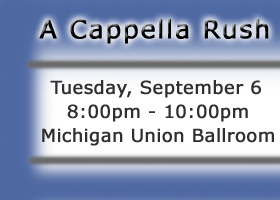
<style>
.page{position:relative;width:280px;height:200px}
.page>*{position:absolute;margin:0}
.t1{font:25px "Verdana";letter-spacing:0.05em;color:#000000;font-weight:bold}
.t2{font:18px/24px "Verdana";color:#2f2f2f;font-weight:bold}
.t3{font:24px "Verdana";letter-spacing:0.05em;color:#000000;font-weight:bold}
</style>
<div class="page">
<p class="t1" style="left:39px;top:19px;width:230px;height:25px">A Cappella Rush</p>
<p class="t2" style="left:42px;top:80px;width:232px;height:66px;text-align:center"><span class="t3"><br><br></span>Tuesday, September 6<br>8:00pm - 10:00pm<br>Michigan Union Ballroom</p>
</div>
